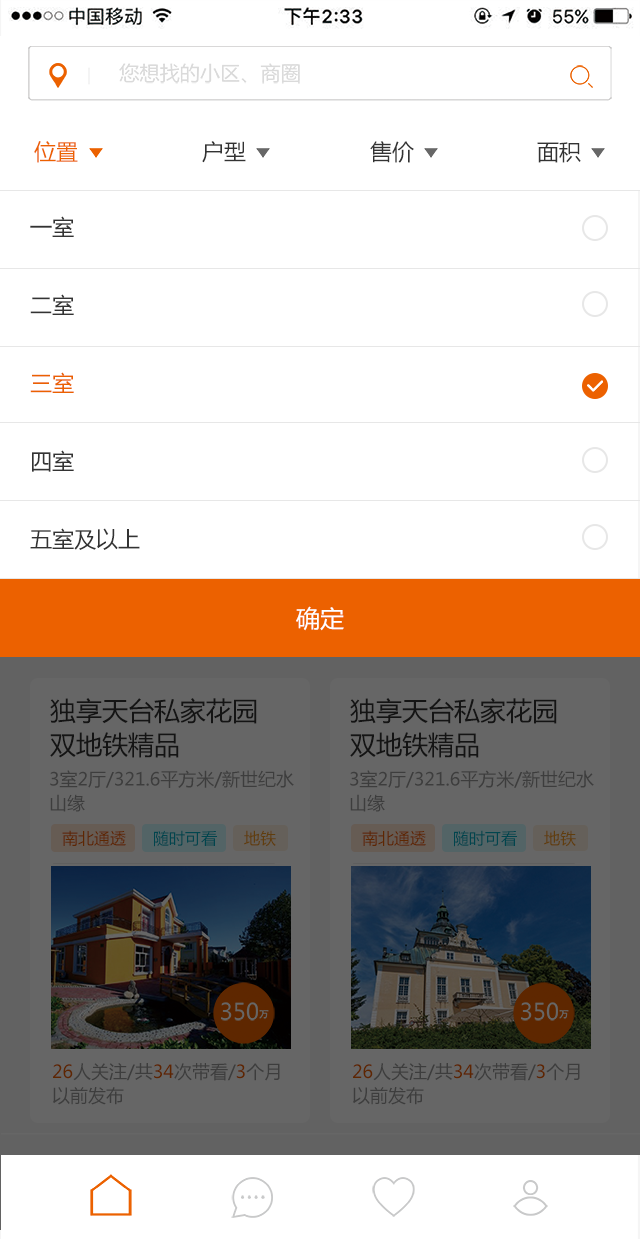
<style>
.page{position:relative;width:640px;height:1239px;background:#ffffff}
.page>*{position:absolute;margin:0}
.t1{font:22px "MicrosoftYaHei";color:#ec6100}
.t2{font:22px "MicrosoftYaHei";color:#333333}
.t3{font:22px/78px "MicrosoftYaHei";color:#333333}
.t4{font:22px/78px "MicrosoftYaHei";color:#eb6100}
.t5{font:24px "MicrosoftYaHei";color:#ffffff}
.t6{font:26px/34px "MicrosoftYaHei";color:#141414}
.t7{font:18px/24px "MicrosoftYaHei";color:#3d3d3d}
.t8{font:16px "MicrosoftYaHei";color:#5e2700}
.t9{font:16px "MicrosoftYaHei";color:#00454e}
.t10{font:16px "MicrosoftYaHei";color:#603e0d}
</style>
<div class="page">
<p class="t1" style="left:34px;top:141px;width:44px;height:22px">位置</p>
<p class="t2" style="left:202px;top:141px;width:44px;height:22px">户型</p>
<p class="t2" style="left:370px;top:141px;width:44px;height:22px">售价</p>
<p class="t2" style="left:537px;top:142px;width:44px;height:21px">面积</p>
<p class="t3" style="left:30px;top:216px;width:110px;height:334px">一室<br>二室<br><span class="t4">三室<br></span>四室<br>五室及以上</p>
<p class="t5" style="left:296px;top:606px;width:48px;height:25px">确定</p>
<p class="t6" style="left:50px;top:698px;width:207px;height:60px">独享天台私家花园<br>双地铁精品</p>
<p class="t6" style="left:350px;top:698px;width:207px;height:60px">独享天台私家花园<br>双地铁精品</p>
<p class="t7" style="left:50px;top:770px;width:244px;height:42px">3室2厅/321.6平方米/新世纪水<br>山缘</p>
<p class="t7" style="left:350px;top:770px;width:244px;height:42px">3室2厅/321.6平方米/新世纪水<br>山缘</p>
<p class="t8" style="left:62px;top:830px;width:64px;height:16px">南北通透</p>
<p class="t9" style="left:154px;top:830px;width:63px;height:17px">随时可看</p>
<p class="t10" style="left:244px;top:830px;width:32px;height:17px">地铁</p>
<p class="t8" style="left:362px;top:830px;width:64px;height:16px">南北通透</p>
<p class="t9" style="left:454px;top:830px;width:63px;height:17px">随时可看</p>
<p class="t10" style="left:544px;top:830px;width:32px;height:17px">地铁</p>
<p class="t7" style="left:53px;top:1063px;width:227px;height:42px">26人关注/共34次带看/3个月<br>以前发布</p>
<p class="t7" style="left:353px;top:1063px;width:227px;height:42px">26人关注/共34次带看/3个月<br>以前发布</p>
</div>
